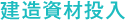
<style>
.page{position:relative;width:129px;height:21px;background:#ffffff}
.page>*{position:absolute;margin:0}
.t1{font:20px "GothicMB101Pro-Medium";letter-spacing:0.05em;color:#1dbcc0}
</style>
<div class="page">
<p class="t1" style="left:0px;top:0px;width:125px;height:20px">建造資材投入</p>
</div>
